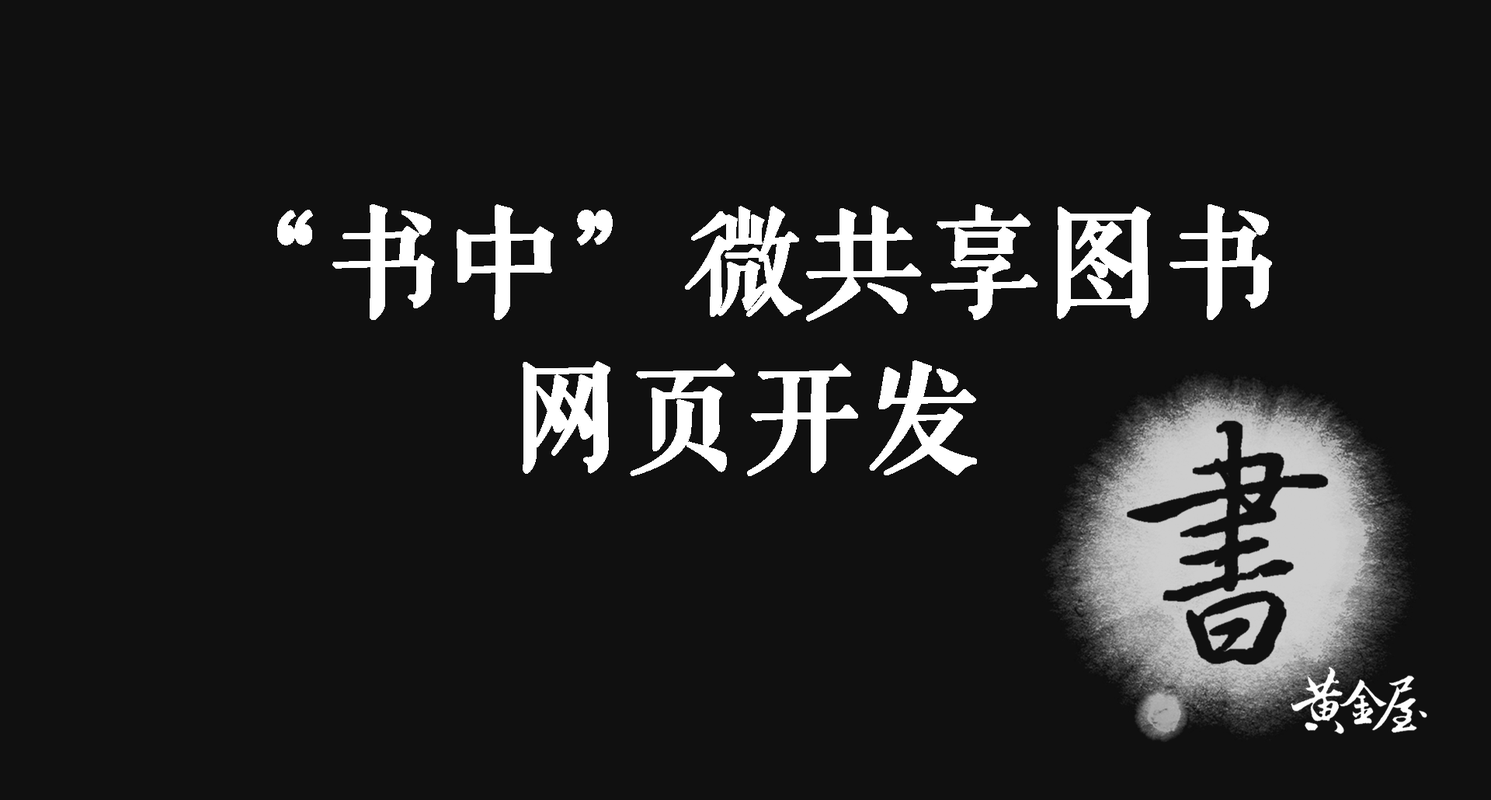
<style>
.page{position:relative;width:1491px;height:800px;background:#101010}
.page>*{position:absolute;margin:0}
.t1{font:116.5px/154.8px "FZQKBYSJW--GB1-0";color:#ffffff;font-weight:bold}
</style>
<div class="page">
<p class="t1" style="left:277px;top:204px;width:995px;height:272px;text-align:center">“书中”微共享图书<br>网页开发</p>
</div>
